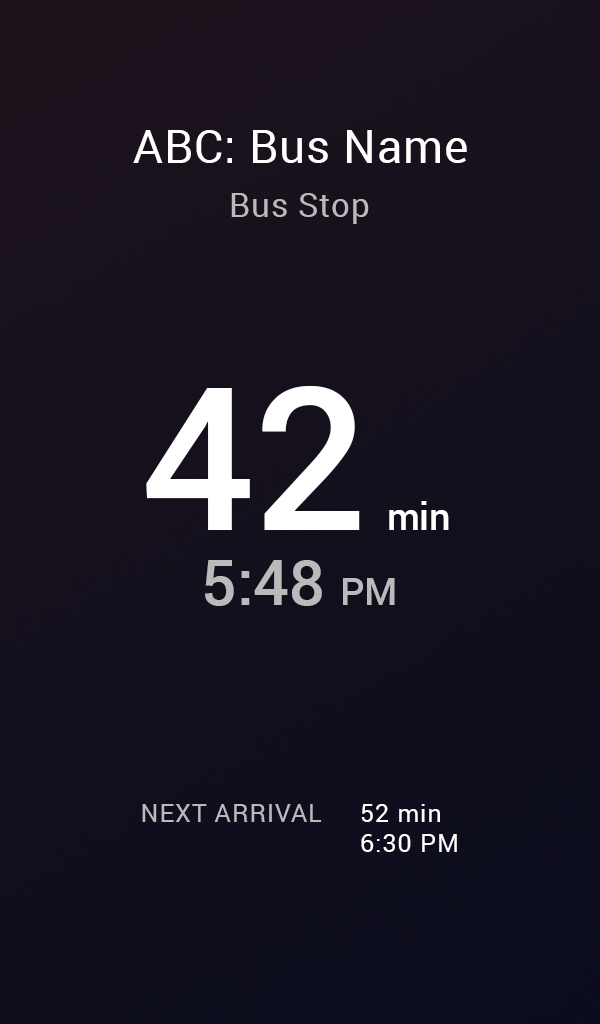
<style>
.page{position:relative;width:600px;height:1024px}
.page>*{position:absolute;margin:0}
.t1{font:45.8px "Roboto-Regular";letter-spacing:0.02em;color:#ffffff}
.t2{font:33.3px "Roboto-Regular";letter-spacing:0.02em;color:#bbbabb}
.t3{font:37.5px "Roboto-Medium";color:#ffffff}
.t4{font:200px "Roboto-Medium";color:#ffffff}
.t5{font:62.5px "Roboto-Medium";color:#bababb}
.t6{font:37.5px "Roboto-Medium";color:#bababb}
.t7{font:25px "Roboto-Regular";letter-spacing:0.04em;color:#bab9bb}
.t8{font:25px "Roboto-Regular";letter-spacing:0.04em;color:#ffffff}
</style>
<div class="page">
<p class="t1" style="left:133px;top:130px;width:334px;height:33px">ABC: Bus Name</p>
<p class="t2" style="left:231px;top:193px;width:138px;height:31px">Bus Stop</p>
<p class="t3" style="left:146px;top:386px;width:303px;height:144px"><span class="t4">42 </span>min</p>
<p class="t5" style="left:205px;top:560px;width:190px;height:46px">5:48 <span class="t6">PM</span></p>
<p class="t7" style="left:142px;top:804px;width:179px;height:18px">NEXT ARRIVAL</p>
<p class="t8" style="left:361px;top:804px;width:96px;height:48px">52 min<br>6:30 PM</p>
</div>
